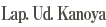
<style>
.page{position:relative;width:106px;height:27px;background:#ffffff}
.page>*{position:absolute;margin:0}
.t1{font:18px "RyuminPro-ExBold";letter-spacing:-0.08em;color:#4c4843;scale:0.85 1}
</style>
<div class="page">
<p class="t1" style="left:1px;top:6px;width:106px;height:17px">Lap. Ud. Kanoya</p>
</div>
